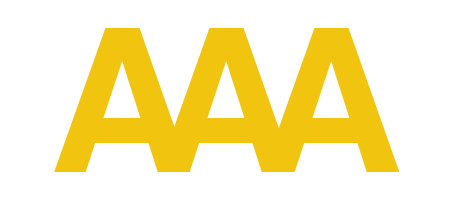
<style>
.page{position:relative;width:450px;height:200px;background:#ffffff}
.page>*{position:absolute;margin:0}
.t1{font:200px "Helvetica-Bold";letter-spacing:-0.2em;color:#f1c40f}
</style>
<div class="page">
<p class="t1" style="left:54px;top:28px;width:346px;height:144px">AAA</p>
</div>
